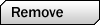
<style>
.page{position:relative;width:100px;height:25px}
.page>*{position:absolute;margin:0}
.t1{font:15px "FranklinGothic-Medium";color:#000000}
</style>
<div class="page">
<p class="t1" style="left:12px;top:7px;width:51px;height:11px">Remove</p>
</div>
